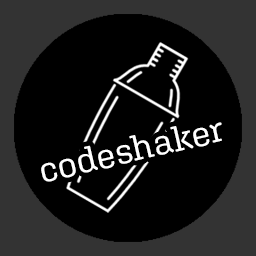
<style>
.page{position:relative;width:256px;height:256px;background:#000000}
.page>*{position:absolute;margin:0}
.t1{font:36px "AgletSlab-Regular";color:#ffffff}
</style>
<div class="page">
<p class="t1" style="left:41px;top:122px;width:181px;height:60px;rotate:-13deg">codeshaker</p>
</div>
